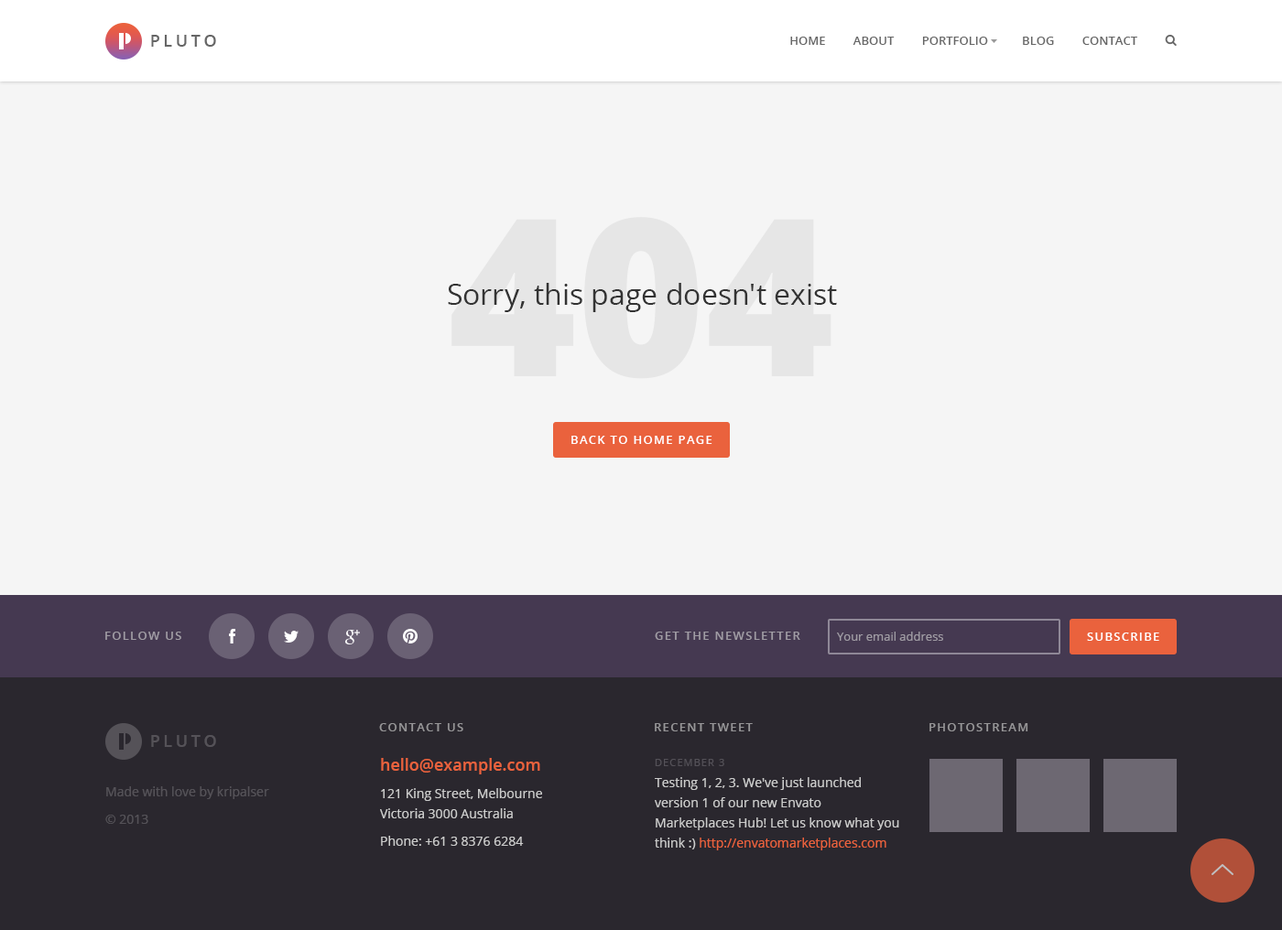
<style>
.page{position:relative;width:1282px;height:930px;background:#f5f5f5}
.page>*{position:absolute;margin:0}
.t1{font:16.5px "OpenSans-Semibold";letter-spacing:0.2em;color:#666666;text-transform:uppercase}
.t2{font:11.9px "OpenSans-Semibold";color:#666666;text-transform:uppercase}
.t3{font:29.3px "OpenSans";color:#333333}
.t4{font:11.9px "OpenSans-Semibold";letter-spacing:0.1em;color:#ffffff;text-transform:uppercase}
.t5{font:11.9px "OpenSans-Semibold";letter-spacing:0.1em;color:#a09ca4;text-transform:uppercase}
.t6{font:11.9px "OpenSans";color:#a09ca4}
.t7{font:11.9px "OpenSans-Semibold";letter-spacing:0.1em;color:#979698;text-transform:uppercase}
.t8{font:16.5px "OpenSans-Semibold";letter-spacing:0.2em;color:#555258;text-transform:uppercase}
.t9{font:12.8px/27.5px "OpenSans";color:#cccccc}
.t10{font:16.5px/22px "OpenSans-Semibold";color:#ea623d}
.t11{font:12.8px/20.1px "OpenSans";color:#cccccc}
.t12{font:10.1px "OpenSans";letter-spacing:0.1em;color:#545158;text-transform:uppercase}
.t13{font:12.8px/21.1px "OpenSans";color:#cccccc}
.t14{font:12.8px/20.1px "OpenSans";color:#ea623d}
.t15{font:12.8px/27.5px "OpenSans";color:#555258}
</style>
<div class="page">
<p class="t1" style="left:151px;top:35px;width:65px;height:12px">Pluto</p>
<p class="t2" style="left:790px;top:37px;width:347px;height:8px">Home         About         Portfolio           Blog         Contact</p>
<p class="t3" style="left:448px;top:283px;width:389px;height:29px">Sorry, this page doesn't exist</p>
<p class="t4" style="left:571px;top:436px;width:141px;height:8px">Back to home page</p>
<p class="t5" style="left:105px;top:632px;width:76px;height:8px">Follow us</p>
<p class="t5" style="left:655px;top:632px;width:145px;height:8px">Get the newsletter</p>
<p class="t6" style="left:837px;top:632px;width:106px;height:9px">Your email address</p>
<p class="t4" style="left:1087px;top:633px;width:72px;height:8px">Subscribe</p>
<p class="t7" style="left:379px;top:723px;width:84px;height:9px">Contact us</p>
<p class="t7" style="left:655px;top:723px;width:98px;height:9px">Recent tweet</p>
<p class="t7" style="left:929px;top:723px;width:99px;height:9px">Photostream</p>
<p class="t8" style="left:151px;top:735px;width:65px;height:12px">Pluto</p>
<p class="t9" style="left:380px;top:758px;width:162px;height:88px"><span class="t10">hello@example.com<br></span>121 King Street, Melbourne <br><span class="t11">Victoria 3000 Australia<br></span>Phone: +61 3 8376 6284</p>
<p class="t12" style="left:655px;top:759px;width:69px;height:7px">December 3</p>
<p class="t11" style="left:655px;top:777px;width:244px;height:74px"><span class="t13">Testing 1, 2, 3. We've just launched </span>version 1 of our new Envato Marketplaces Hub! Let us know what you think :) <span class="t14">http://envatomarketplaces.com</span></p>
<p class="t15" style="left:105px;top:787px;width:164px;height:37px">Made with love by kripalser<br>© 2013</p>
</div>
